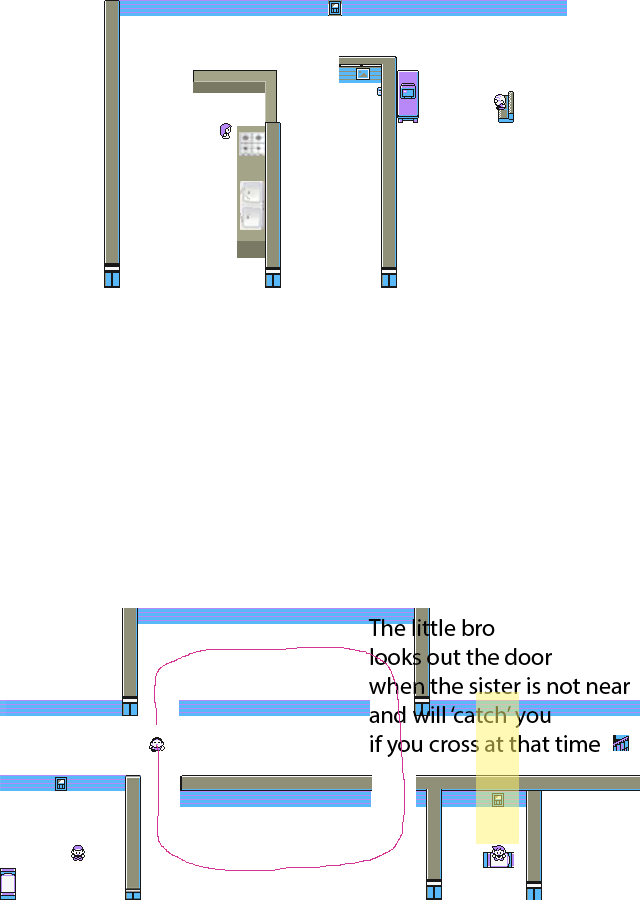
<style>
.page{position:relative;width:640px;height:900px;background:#ffffff}
.page>*{position:absolute;margin:0}
.t1{font:24px "MyriadPro-Regular";color:#000000}
</style>
<div class="page">
<p class="t1" style="left:368px;top:619px;width:262px;height:138px">The little bro<br>looks out the door<br>when the sister is not near<br>and will ‘catch’ you<br>if you cross at that time</p>
</div>
